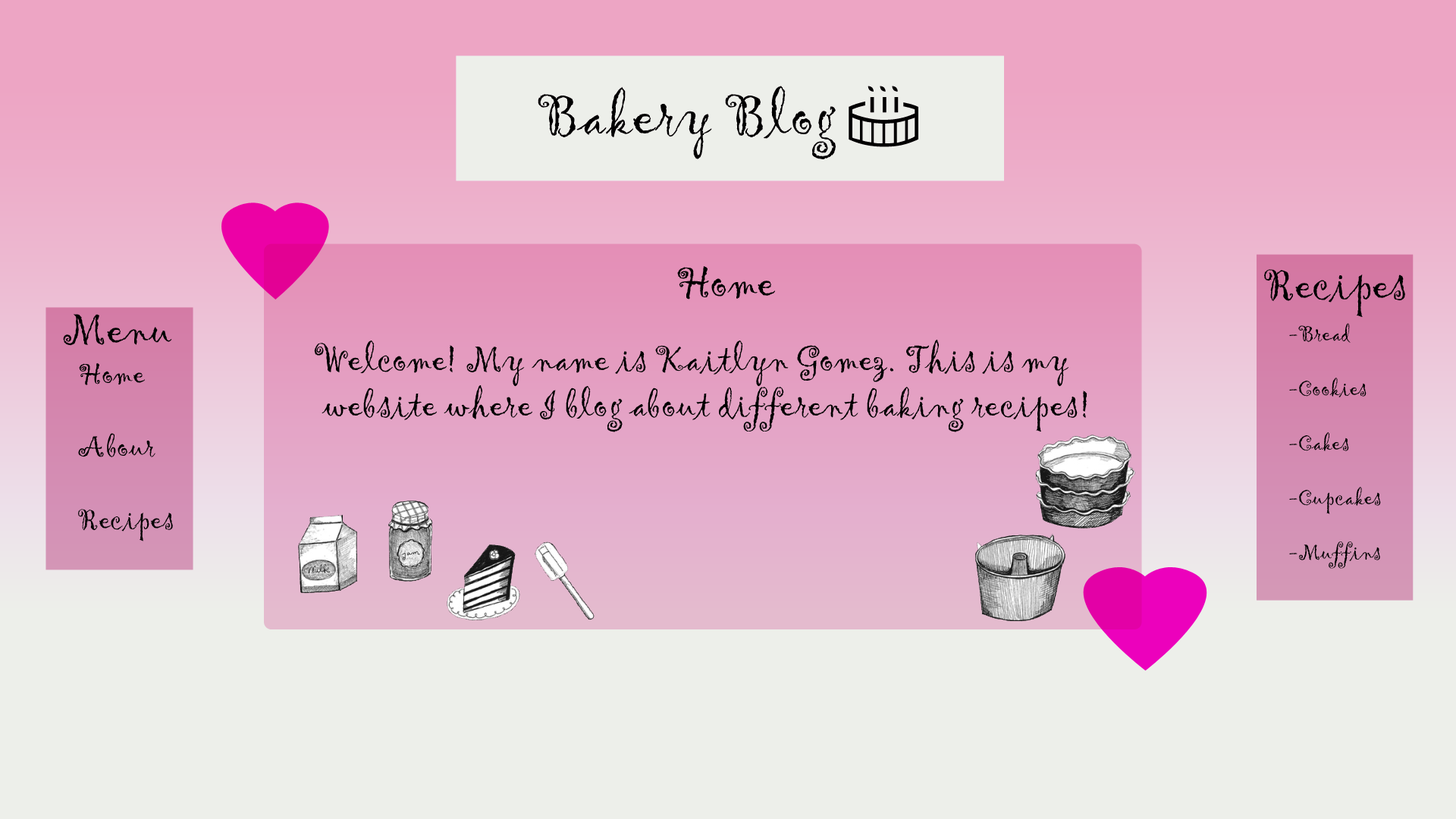
<style>
.page{position:relative;width:1456px;height:819px;background:#edefea}
.page>*{position:absolute;margin:0}
.t1{font:45.5px "Gigi-Regular";color:#000000}
.t2{font:22.7px "Gigi-Regular";color:#000000}
.t3{font:37.9px "Gigi-Regular";color:#000000}
.t4{font:30.3px "Gigi-Regular";color:#000000}
</style>
<div class="page">
<p class="t1" style="left:677px;top:266px;width:98px;height:34px">Home</p>
<p class="t1" style="left:1264px;top:269px;width:141px;height:48px">Recipes</p>
<p class="t1" style="left:63px;top:314px;width:109px;height:32px">Menu</p>
<p class="t2" style="left:1289px;top:323px;width:92px;height:246px">-Bread<br><br>-Cookies<br><br>-Cakes<br><br>-Cupcakes<br><br>-Muffins</p>
<p class="t3" style="left:314px;top:340px;width:773px;height:92px">Welcome! My name is Kaitlyn Gomez. This is my<br> website where I blog about different baking recipes!</p>
<p class="t4" style="left:78px;top:362px;width:95px;height:179px">Home<br><br>Abour <br><br>Recipes</p>
</div>
